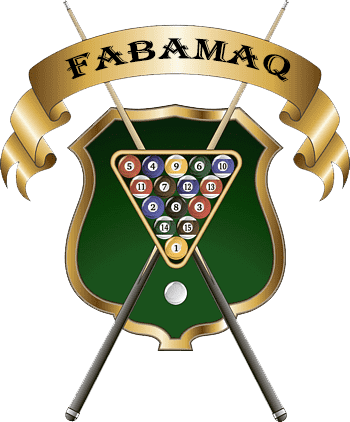
<style>
.page{position:relative;width:350px;height:422px;background:#ffffff}
.page>*{position:absolute;margin:0}
.t1{font:30px "Algerian";color:#000000}
</style>
<div class="page">
<p class="t1" style="left:64px;top:38px;width:227px;height:44px">Fabamaq</p>
</div>
